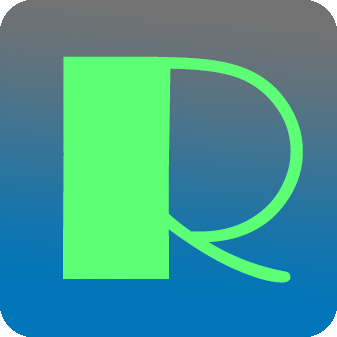
<style>
.page{position:relative;width:337px;height:337px;background:#5dff74}
.page>*{position:absolute;margin:0}
.t1{font:332.4px "Broadway";letter-spacing:-0.1em;color:#5dff74;font-weight:bold;scale:1.07 1}
</style>
<div class="page">
<p class="t1" style="left:63px;top:56px;width:240px;height:227px">R</p>
</div>
